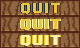
<style>
.page{position:relative;width:80px;height:48px;background:#926542}
.page>*{position:absolute;margin:0}
.t1{font:11.9px "8BITWONDERNominal";color:#eac534}
.t2{font:11.9px "8BITWONDERNominal";color:#f6f4a4}
</style>
<div class="page">
<p class="t1" style="left:20px;top:3px;width:41px;height:10px">Quit</p>
<p class="t1" style="left:20px;top:19px;width:41px;height:10px">Quit</p>
<p class="t2" style="left:20px;top:35px;width:41px;height:10px">Quit</p>
</div>
